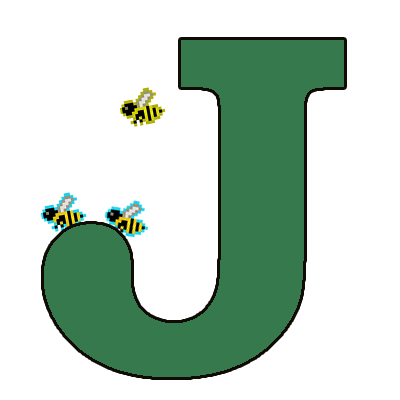
<style>
.page{position:relative;width:400px;height:400px;background:#ffffff}
.page>*{position:absolute;margin:0}
.t1{font:486.2px "BookmanOldStyle-Bold";color:#35794d}
</style>
<div class="page">
<p class="t1" style="left:44px;top:40px;width:300px;height:337px">J</p>
</div>
